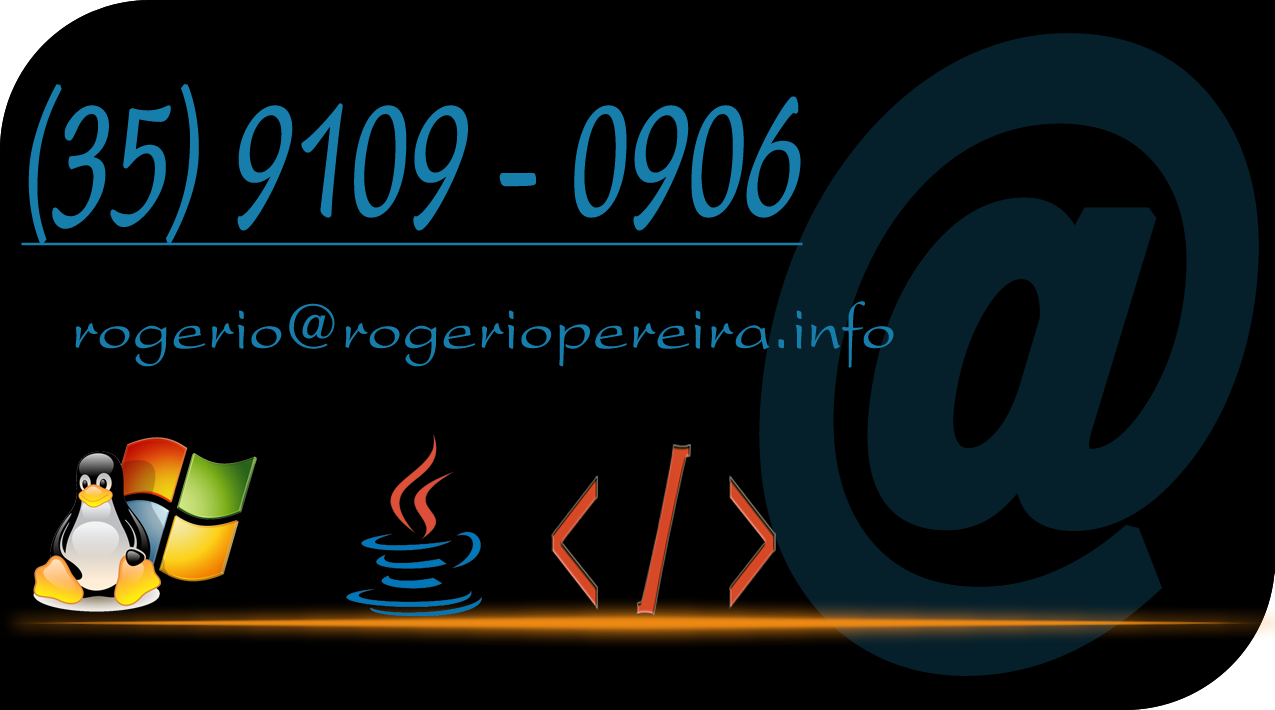
<style>
.page{position:relative;width:1275px;height:710px;background:#000000}
.page>*{position:absolute;margin:0}
.t1{font:700px "BremenBT-Black";color:#06202b;font-weight:bold;font-style:italic;scale:0.71 1}
.t2{font:200px "PresidentPlain";color:#177eac;font-weight:bold;font-style:italic;text-decoration:underline;scale:0.5 1}
.t3{font:70px "PresentLTStd";color:#177eac}
</style>
<div class="page">
<p class="t1" style="left:759px;top:33px;width:500px;height:643px">@</p>
<p class="t2" style="left:21px;top:84px;width:782px;height:162px">(35) 9109 - 0906</p>
<p class="t3" style="left:75px;top:301px;width:819px;height:67px">rogerio@rogeriopereira.info</p>
</div>
